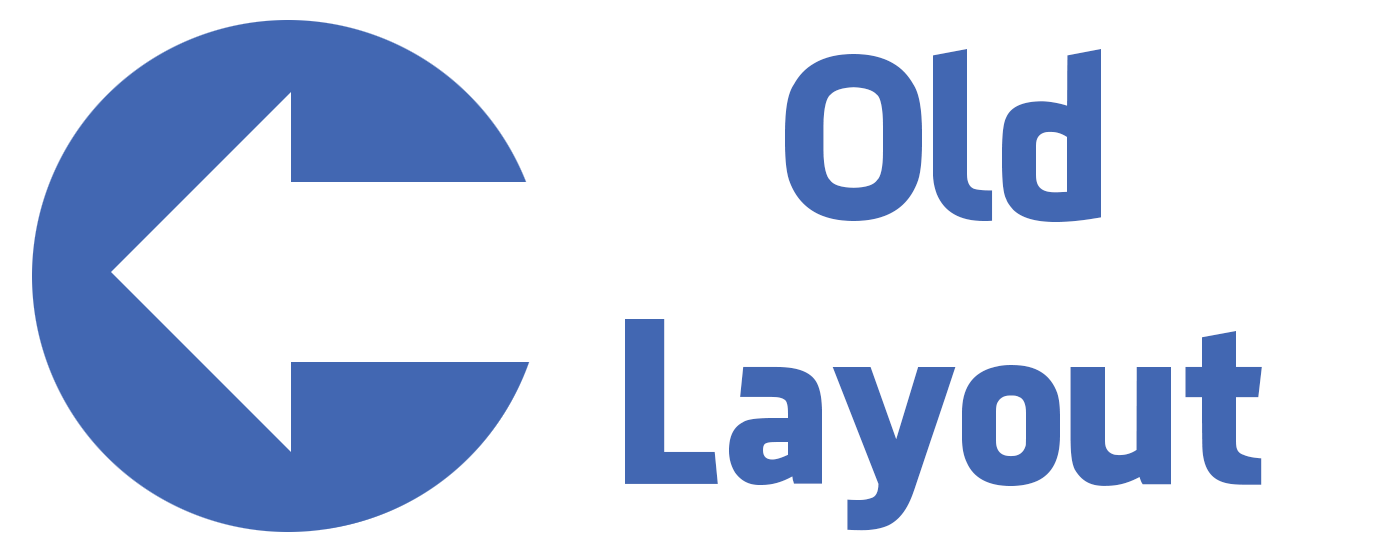
<style>
.page{position:relative;width:1400px;height:560px;background:#ffffff}
.page>*{position:absolute;margin:0}
.t1{font:220px "FacebookLetterFaces";color:#4267b2;scale:0.94 1}
</style>
<div class="page">
<p class="t1" style="left:625px;top:49px;width:637px;height:482px;text-align:center">Old<br>Layout</p>
</div>
